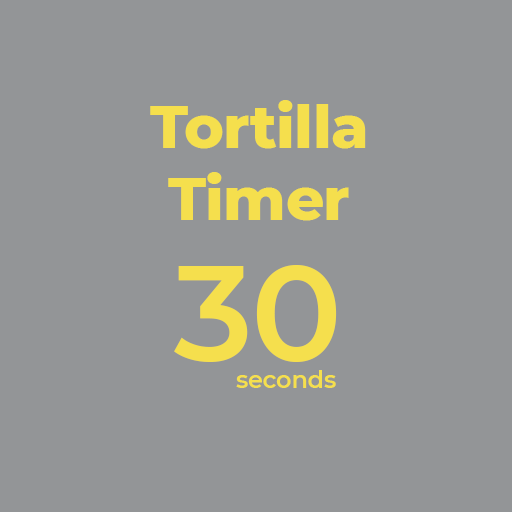
<style>
.page{position:relative;width:512px;height:512px;background:#939597}
.page>*{position:absolute;margin:0}
.t1{font:60px "Montserrat-ExtraBold";letter-spacing:-0.01em;color:#f5df4d}
.t2{font:135.2px "Montserrat-SemiBold";letter-spacing:-0.01em;color:#f5df4d}
.t3{font:24px "Montserrat-SemiBold";letter-spacing:-0.01em;color:#f5df4d}
</style>
<div class="page">
<p class="t1" style="left:150px;top:100px;width:216px;height:121px;text-align:center">Tortilla<br>Timer</p>
<p class="t2" style="left:174px;top:265px;width:163px;height:97px">30</p>
<p class="t3" style="left:236px;top:370px;width:100px;height:18px">seconds</p>
</div>
